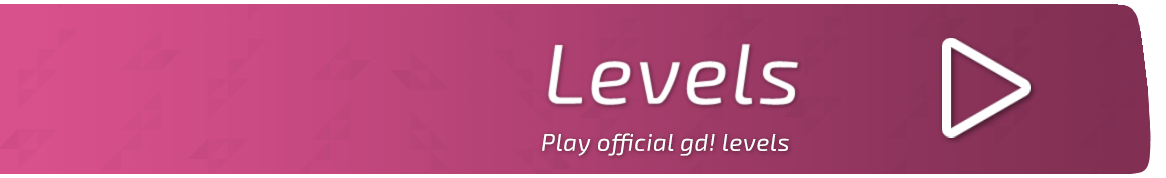
<style>
.page{position:relative;width:1166px;height:178px}
.page>*{position:absolute;margin:0}
.t1{font:24px "Exo2.0-Italic";letter-spacing:0.025em;color:#ffffff}
</style>
<div class="page">
<p class="t1" style="left:542px;top:133px;width:247px;height:23px">Play official gd! levels</p>
</div>
